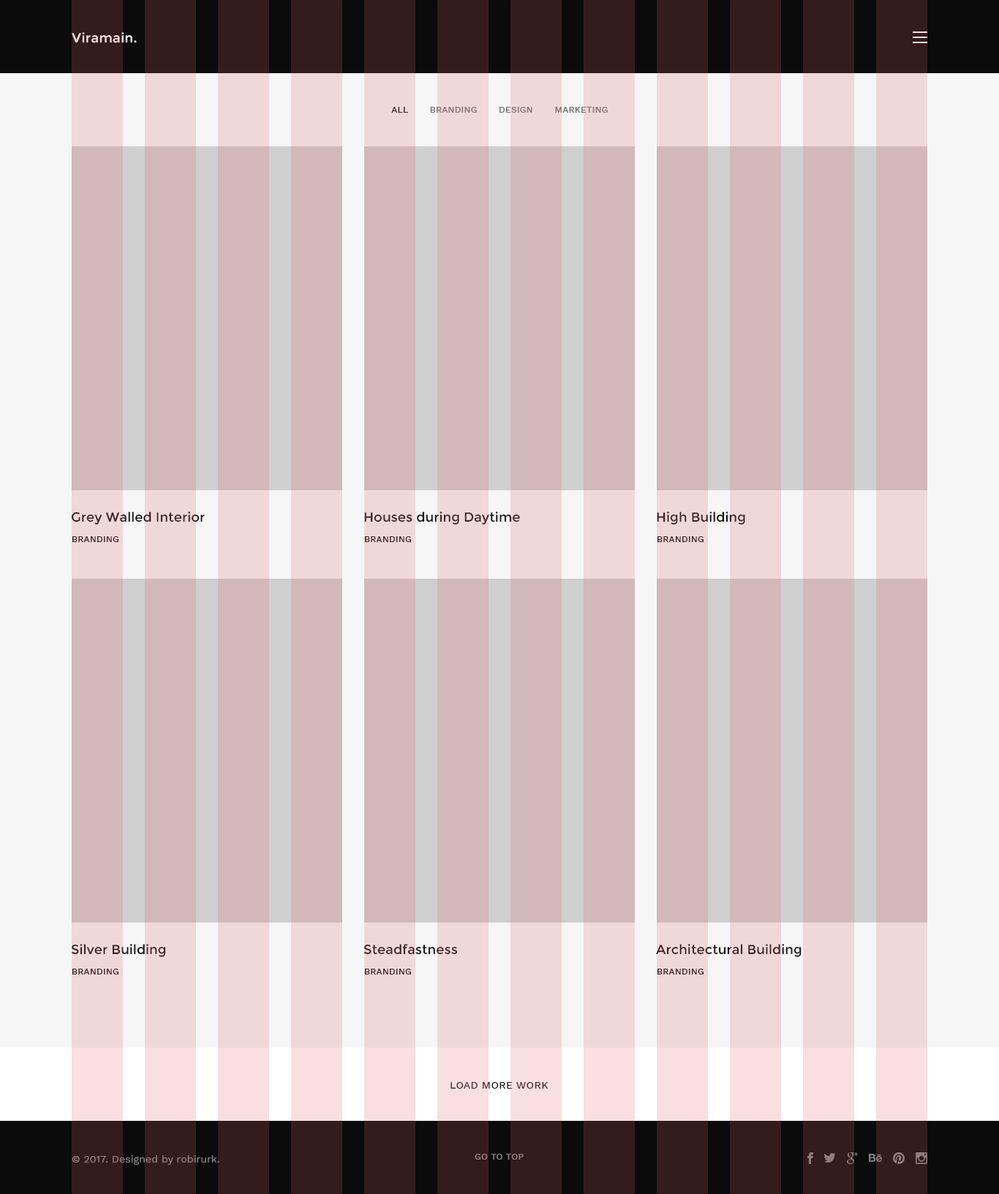
<style>
.page{position:relative;width:999px;height:1194px;background:#d2b8b8}
.page>*{position:absolute;margin:0}
.t1{font:13.2px "Montserrat-Regular";letter-spacing:0.025em;color:#f9dfdf}
.t2{font:8.8px "WorkSans-Medium";letter-spacing:0.025em;color:#727272;text-transform:uppercase}
.t3{font:8.8px "WorkSans-Medium";letter-spacing:0.025em;color:#151515;text-transform:uppercase}
.t4{font:13.2px "Montserrat-Regular";letter-spacing:0.005em;color:#3d2424}
.t5{font:8.8px "WorkSans-Medium";letter-spacing:0.025em;color:#3d2424;text-transform:uppercase}
.t6{font:10.2px "WorkSans-Medium";letter-spacing:0.025em;color:#442a2a;text-transform:uppercase}
.t7{font:10.2px "WorkSans-Regular";letter-spacing:0.005em;color:#838383}
.t8{font:8.8px "WorkSans-Medium";letter-spacing:0.025em;color:#838383;text-transform:uppercase}
</style>
<div class="page">
<p class="t1" style="left:72px;top:32px;width:65px;height:11px">Viramain.</p>
<p class="t2" style="left:391px;top:107px;width:217px;height:6px"><span class="t3">all</span>       branding       design       marketing</p>
<p class="t4" style="left:71px;top:511px;width:134px;height:13px">Grey Walled Interior</p>
<p class="t4" style="left:364px;top:511px;width:156px;height:13px">Houses during Daytime</p>
<p class="t4" style="left:657px;top:511px;width:88px;height:13px">High Building</p>
<p class="t5" style="left:72px;top:536px;width:46px;height:6px">branding</p>
<p class="t5" style="left:365px;top:536px;width:46px;height:6px">branding</p>
<p class="t5" style="left:657px;top:536px;width:47px;height:6px">branding</p>
<p class="t4" style="left:71px;top:943px;width:95px;height:14px">Silver Building</p>
<p class="t4" style="left:363px;top:943px;width:95px;height:11px">Steadfastness</p>
<p class="t4" style="left:656px;top:943px;width:146px;height:14px">Architectural Building</p>
<p class="t5" style="left:72px;top:968px;width:46px;height:6px">branding</p>
<p class="t5" style="left:365px;top:968px;width:46px;height:6px">branding</p>
<p class="t5" style="left:657px;top:968px;width:47px;height:6px">branding</p>
<p class="t6" style="left:451px;top:1082px;width:98px;height:6px">load more work</p>
<p class="t7" style="left:72px;top:1155px;width:147px;height:9px">© 2017. Designed by robirurk.</p>
<p class="t8" style="left:475px;top:1153px;width:49px;height:6px">go to top</p>
</div>
